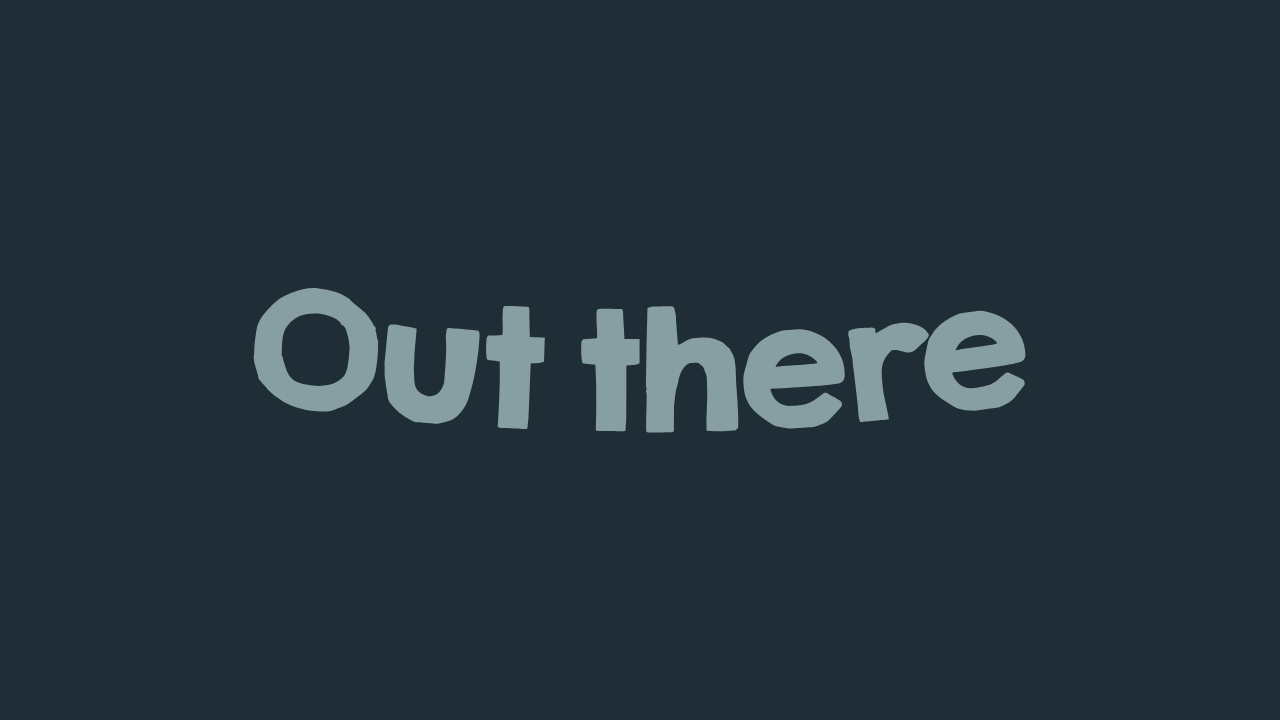
<style>
.page{position:relative;width:1280px;height:720px;background:#1f2d36}
.page>*{position:absolute;margin:0}
.t1{font:150px "KGHAPPYSolid";letter-spacing:-0.11em;color:#879fa3}
</style>
<div class="page">
<p class="t1" style="left:253px;top:287px;width:773px;height:146px">Out there</p>
</div>
